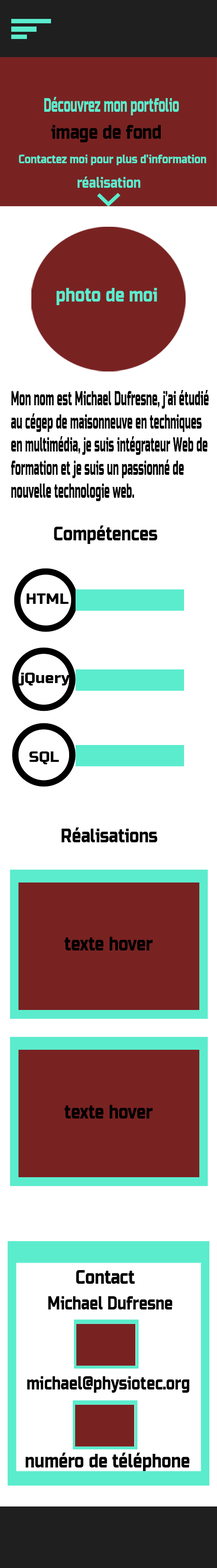
<style>
.page{position:relative;width:217px;height:1568px;background:#ffffff}
.page>*{position:absolute;margin:0}
.t1{font:19.3px "RussoOne";color:#5beccd;scale:0.56 1}
.t2{font:19.3px "RussoOne";color:#010101;scale:0.79 1}
.t3{font:12.1px "RussoOne";color:#5beccd;scale:0.79 1}
.t4{font:19.3px "RussoOne";color:#5beccd;scale:0.79 1}
.t5{font:19.3px "RussoOne";color:#000000;scale:0.48 1}
.t6{font:19.3px "RussoOne";color:#000000;scale:0.79 1}
.t7{font:15.1px "RussoOne";color:#000000}
.t8{font:18.3px "RussoOne";color:#000000;scale:0.77 1}
</style>
<div class="page">
<p class="t1" style="left:44px;top:97px;width:135px;height:18px">Découvrez mon portfolio</p>
<p class="t2" style="left:51px;top:125px;width:110px;height:17px">image de fond</p>
<p class="t3" style="left:19px;top:154px;width:187px;height:11px">Contactez moi pour plus d’information</p>
<p class="t4" style="left:56px;top:288px;width:101px;height:17px">photo de moi</p>
<p class="t5" style="left:11px;top:390px;width:198px;height:111px">Mon nom est Michael Dufresne, j’ai étudié<br>au cégep de maisonneuve en techniques<br>en multimédia, je suis intégrateur Web de formation et je suis un passionné de nouvelle technologie web.</p>
<p class="t6" style="left:54px;top:525px;width:104px;height:19px">Compétences</p>
<p class="t7" style="left:27px;top:593px;width:42px;height:11px">HTML</p>
<p class="t7" style="left:18px;top:673px;width:52px;height:12px">jQuery</p>
<p class="t7" style="left:29px;top:751px;width:30px;height:13px">SQL</p>
<p class="t6" style="left:62px;top:827px;width:96px;height:15px">Réalisations</p>
<p class="t6" style="left:64px;top:937px;width:89px;height:13px">texte hover</p>
<p class="t6" style="left:64px;top:1105px;width:89px;height:14px">texte hover</p>
<p class="t6" style="left:76px;top:1270px;width:59px;height:14px">Contact</p>
<p class="t8" style="left:48px;top:1296px;width:124px;height:13px">Michael Dufresne</p>
<p class="t8" style="left:27px;top:1376px;width:162px;height:17px">michael@physiotec.org</p>
<p class="t6" style="left:25px;top:1453px;width:165px;height:18px">numéro de téléphone</p>
</div>
